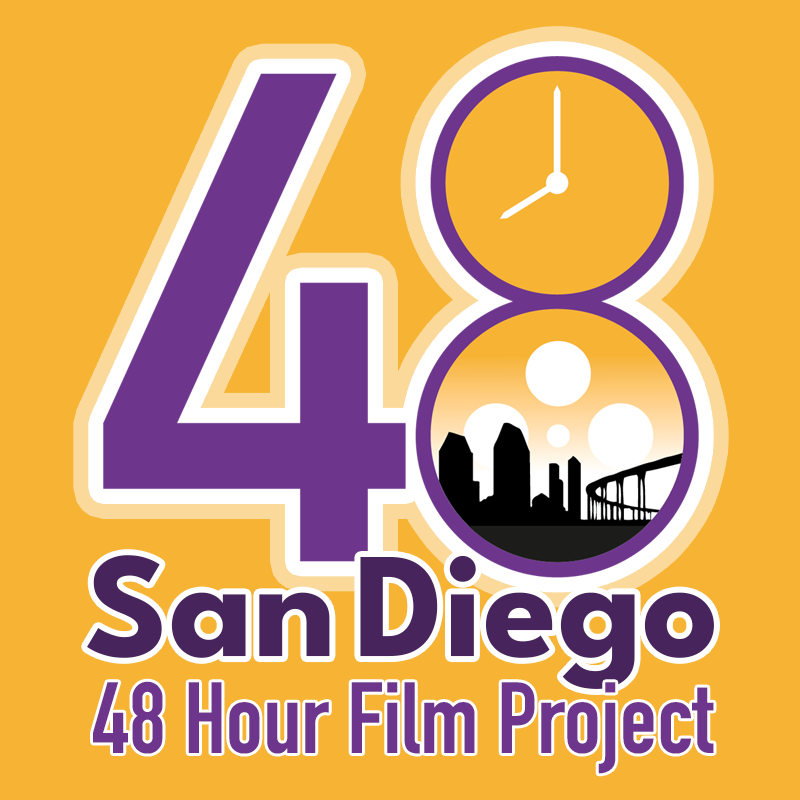
<style>
.page{position:relative;width:800px;height:800px;background:#f6b334}
.page>*{position:absolute;margin:0}
.t1{font:150px "LeagueSpartan-Bold";color:#48245d}
.t2{font:99.2px "DINCondensed-Bold";color:#6d368c}
</style>
<div class="page">
<p class="t1" style="left:87px;top:555px;width:627px;height:134px">San Diego</p>
<p class="t2" style="left:93px;top:681px;width:621px;height:93px">48 Hour Film Project</p>
</div>
